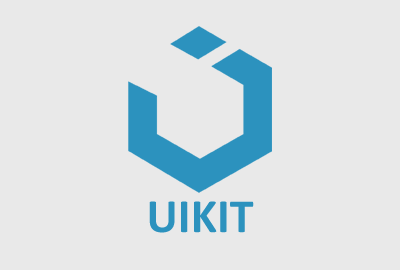
<style>
.page{position:relative;width:400px;height:270px;background:#e9e9e9}
.page>*{position:absolute;margin:0}
.t1{font:48px "Calibri-Bold";color:#2c92be}
</style>
<div class="page">
<p class="t1" style="left:149px;top:201px;width:105px;height:32px">UIKIT</p>
</div>
